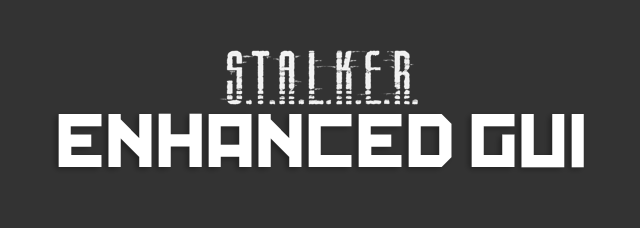
<style>
.page{position:relative;width:640px;height:228px;background:#333333}
.page>*{position:absolute;margin:0}
.t1{font:72px "Kremlin";color:#ffffff;text-transform:uppercase}
</style>
<div class="page">
<p class="t1" style="left:58px;top:113px;width:526px;height:55px">Enhanced GUI</p>
</div>
